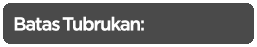
<style>
.page{position:relative;width:257px;height:47px;background:#4a4a4a}
.page>*{position:absolute;margin:0}
.t1{font:18.5px "iCielGotham-Medium";letter-spacing:-0.06em;color:#ffffff}
</style>
<div class="page">
<p class="t1" style="left:14px;top:16px;width:130px;height:15px">Batas Tubrukan:</p>
</div>
